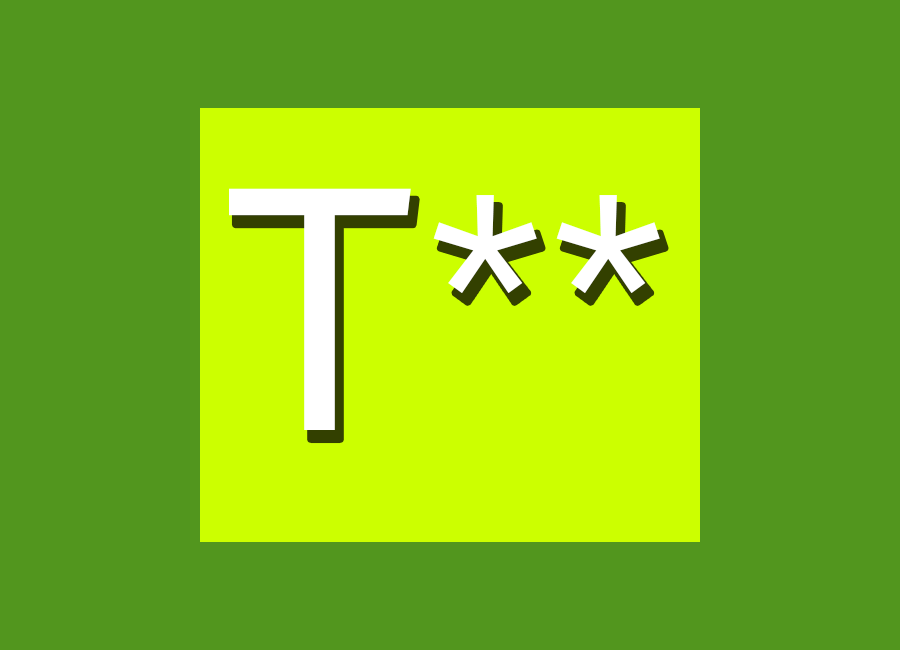
<style>
.page{position:relative;width:900px;height:650px;background:#52961e}
.page>*{position:absolute;margin:0}
.t1{font:350px "FiraCode-Regular";color:#ffffff}
</style>
<div class="page">
<p class="t1" style="left:229px;top:188px;width:431px;height:242px">T**</p>
</div>
